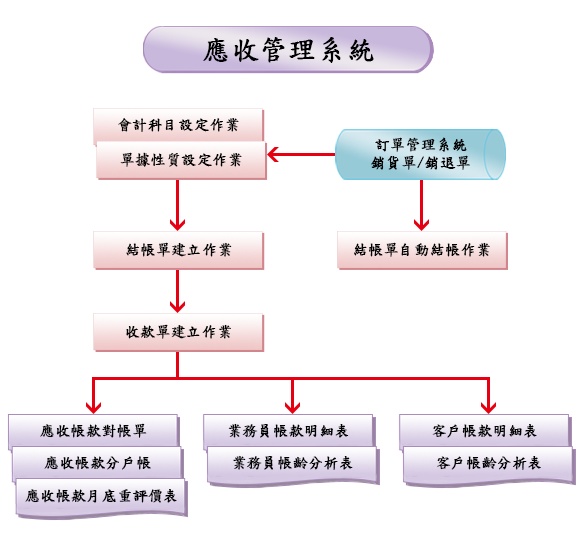
<style>
.page{position:relative;width:577px;height:545px;background:#ffffff}
.page>*{position:absolute;margin:0}
.t1{font:28px "DFKaiShu-SB-Estd-BF";color:#000000;font-weight:bold}
.t2{font:15px "DFKaiShu-SB-Estd-BF";color:#000000;font-weight:bold}
.t3{font:15px/18px "DFKaiShu-SB-Estd-BF";color:#000000;font-weight:bold}
</style>
<div class="page">
<p class="t1" style="left:203px;top:37px;width:171px;height:26px">應收管理系統</p>
<p class="t2" style="left:118px;top:118px;width:121px;height:14px">會計科目設定作業</p>
<p class="t3" style="left:371px;top:137px;width:99px;height:33px;text-align:center">訂單管理系統<br>銷貨單/銷退單</p>
<p class="t2" style="left:120px;top:152px;width:122px;height:15px">單據性質設定作業</p>
<p class="t2" style="left:126px;top:242px;width:106px;height:15px">結帳單建立作業</p>
<p class="t2" style="left:354px;top:242px;width:136px;height:15px">結帳單自動結帳作業</p>
<p class="t2" style="left:126px;top:324px;width:105px;height:15px">收款單建立作業</p>
<p class="t2" style="left:40px;top:423px;width:107px;height:15px">應收帳款對帳單</p>
<p class="t2" style="left:228px;top:423px;width:121px;height:15px">業務員帳款明細表</p>
<p class="t2" style="left:432px;top:424px;width:105px;height:14px">客戶帳款明細表</p>
<p class="t2" style="left:44px;top:456px;width:107px;height:14px">應收帳款分戶帳</p>
<p class="t2" style="left:233px;top:455px;width:120px;height:15px">業務員帳齡分析表</p>
<p class="t2" style="left:437px;top:456px;width:104px;height:14px">客戶帳齡分析表</p>
<p class="t2" style="left:25px;top:489px;width:152px;height:14px">應收帳款月底重評價表</p>
</div>
